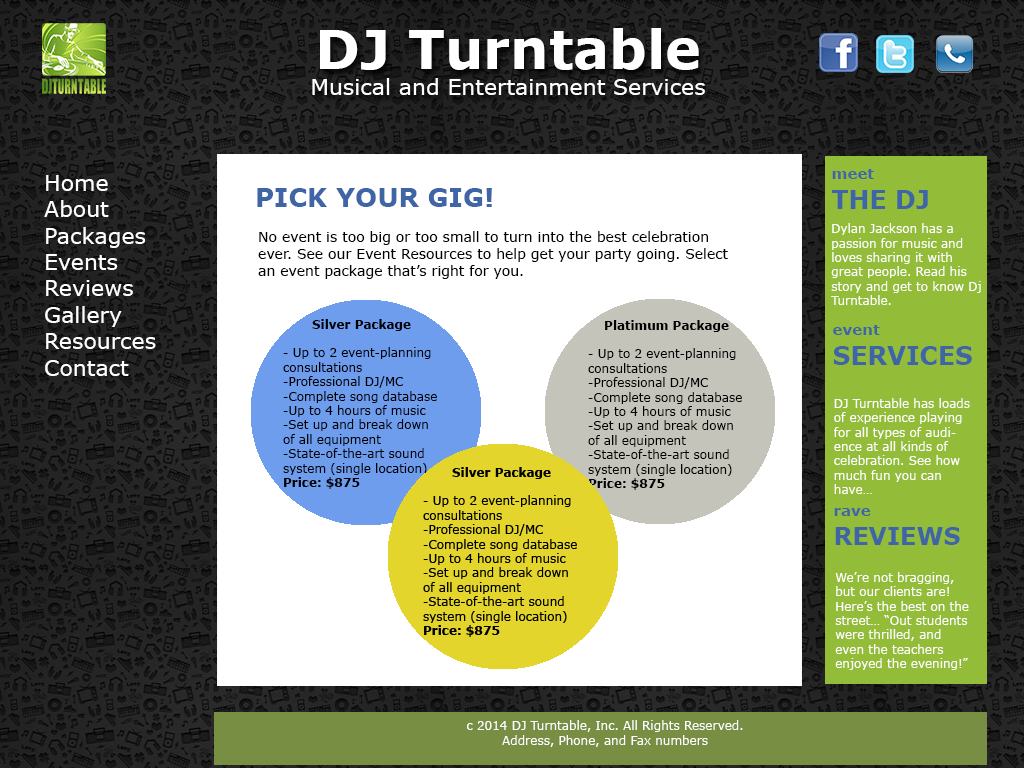
<style>
.page{position:relative;width:1024px;height:768px;background:#ffffff}
.page>*{position:absolute;margin:0}
.t1{font:22px "Verdana";color:#ffffff}
.t2{font:54px "Verdana-Bold";color:#ffffff}
.t3{font:25px "Verdana-Bold";color:#3f65a6}
.t4{font:17px "Verdana-Bold";color:#3f65a6}
.t5{font:15px "Verdana-Bold";color:#3f65a6}
.t6{font:26px "Verdana-Bold";color:#3f65a6}
.t7{font:14px "Verdana";color:#000000}
.t8{font:12px "Verdana";color:#ffffff}
.t9{font:12px "Verdana-Bold";color:#ffffff}
.t10{font:12px "Verdana";color:#000000}
.t11{font:12px "Verdana-Bold";color:#000000}
.t12{font:24px "Verdana-Bold";color:#3f65a6}
</style>
<div class="page">
<p class="t1" style="left:312px;top:28px;width:393px;height:67px;text-align:center"><span class="t2">DJ Turntable<br></span>Musical and Entertainment Services</p>
<p class="t3" style="left:832px;top:169px;width:96px;height:40px"><span class="t4"><br></span><span class="t5">meet<br></span>THE DJ</p>
<p class="t1" style="left:44px;top:175px;width:112px;height:201px">Home<br>About<br>Packages<br>Events<br>Reviews<br>Gallery<br>Resources<br>Contact</p>
<p class="t6" style="left:257px;top:188px;width:235px;height:19px">PICK YOUR GIG!</p>
<p class="t7" style="left:258px;top:231px;width:470px;height:48px">No event is too big or too small to turn into the best celebration ever. See our Event Resources to help get your party going. Select an event package that’s right for you.</p>
<p class="t8" style="left:831px;top:223px;width:150px;height:82px;text-align:center"><span class="t9"><br></span>Dylan Jackson has a passion for music and loves sharing it with great people. Read his story and get to know Dj Turntable.</p>
<p class="t10" style="left:283px;top:319px;width:154px;height:170px;text-align:center"><span class="t11"><br>Silver Package<br></span><br>- Up to 2 event-planning consultations<br>-Professional DJ/MC<br>-Complete song database<br>-Up to 4 hours of music<br>-Set up and break down of all equipment<br>-State-of-the-art sound system (single location)<br><span class="t11">Price: $875</span></p>
<p class="t10" style="left:588px;top:320px;width:154px;height:170px;text-align:center"><span class="t11"><br>Platimum Package<br></span><br>- Up to 2 event-planning consultations<br>-Professional DJ/MC<br>-Complete song database<br>-Up to 4 hours of music<br>-Set up and break down of all equipment<br>-State-of-the-art sound system (single location)<br><span class="t11">Price: $875</span></p>
<p class="t3" style="left:833px;top:325px;width:139px;height:40px"><span class="t4"><br></span><span class="t5">event<br></span>SERVICES</p>
<p class="t8" style="left:834px;top:398px;width:136px;height:96px">DJ Turntable has loads of experience playing for all types of audience at all kinds of celebration. See how much fun you can have…</p>
<p class="t12" style="left:834px;top:508px;width:126px;height:37px"><span class="t4"><br></span><span class="t5">rave<br></span>REVIEWS</p>
<p class="t8" style="left:835px;top:572px;width:134px;height:98px">We’re not bragging, but our clients are! Here’s the best on the street… “Out students were thrilled, and even the teachers enjoyed the evening!”</p>
<p class="t8" style="left:467px;top:720px;width:276px;height:27px;text-align:center">c 2014 DJ Turntable, Inc. All Rights Reserved.<br>Address, Phone, and Fax numbers<br>DJ_Turntable email address</p>
</div>
